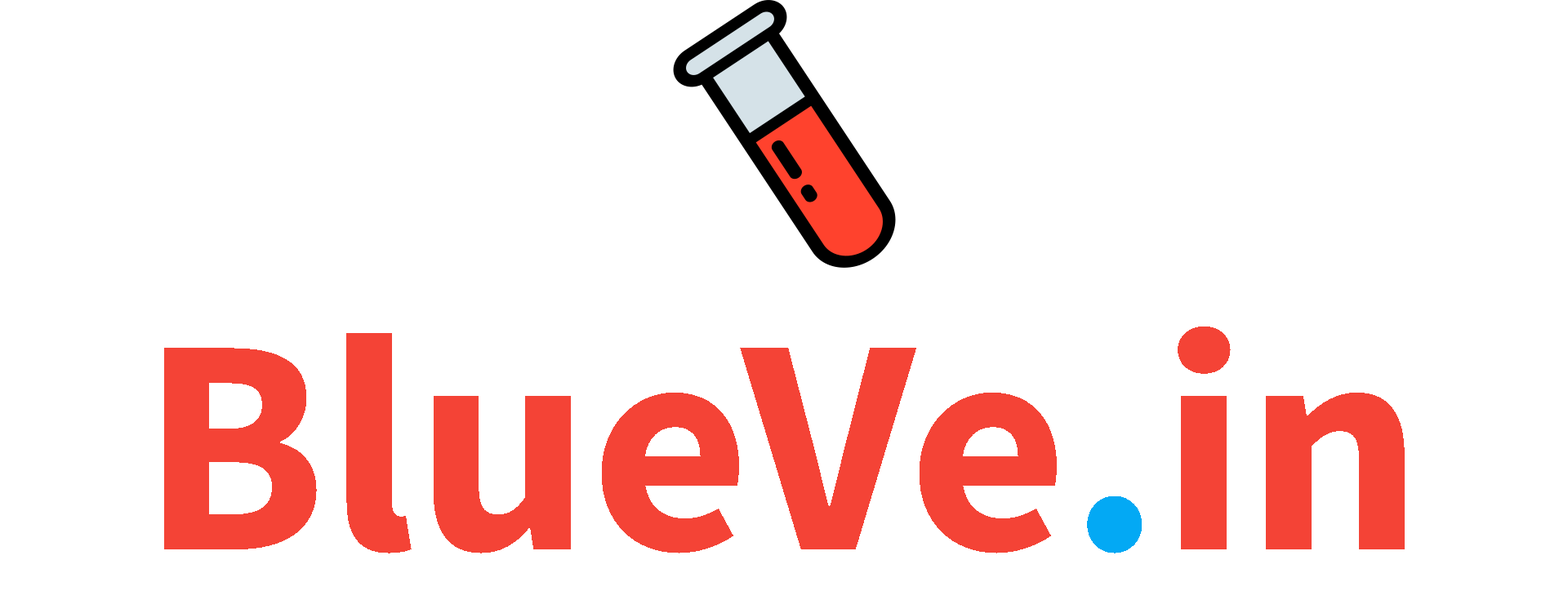
<style>
.page{position:relative;width:1568px;height:591px;background:#ffffff}
.page>*{position:absolute;margin:0}
.t1{font:308.9px "SourceSansRoman-Bold";color:#f44336}
.t2{font:308.9px "SourceSansRoman-Bold";color:#03a9f4}
</style>
<div class="page">
<p class="t1" style="left:163px;top:327px;width:1242px;height:227px">BlueVe<span class="t2">.</span>in</p>
</div>
